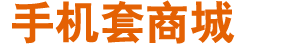
<style>
.page{position:relative;width:300px;height:45px;background:#ffffff}
.page>*{position:absolute;margin:0}
.t1{font:45px "ç»å¸ç²é»ç®-regular";color:#e46103}
</style>
<div class="page">
<p class="t1" style="left:12px;top:0px;width:223px;height:44px">手机套商城</p>
</div>
